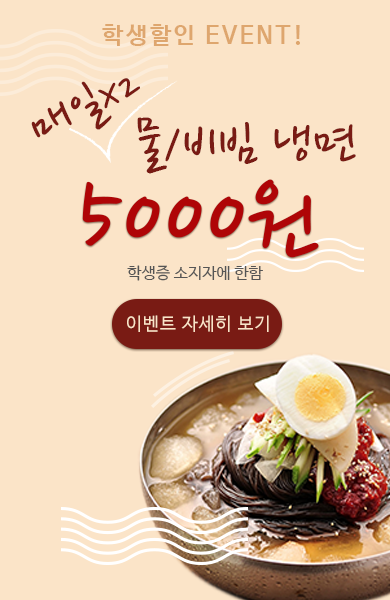
<style>
.page{position:relative;width:390px;height:600px;background:#fbe4c8}
.page>*{position:absolute;margin:0}
.t1{font:24px "NanumBarunGothicBold";letter-spacing:0.1em;color:#dea66d}
.t2{font:57.6px "NanumPen";color:#791b14}
.t3{font:49.4px "NanumPen";color:#791b14}
.t4{font:59.5px "NanumPen";color:#791b14}
.t5{font:116.1px "NanumPen";color:#af0507}
.t6{font:16px "NanumBarunGothic";color:#555555}
.t7{font:18px "NanumBarunGothic";letter-spacing:0.05em;color:#fbe4c8;text-transform:uppercase}
</style>
<div class="page">
<p class="t1" style="left:102px;top:24px;width:198px;height:22px">학생할인 EVENT!</p>
<p class="t2" style="left:31px;top:78px;width:109px;height:60px;rotate:-26deg">매일<span class="t3">X2</span></p>
<p class="t4" style="left:137px;top:117px;width:219px;height:57px">물/비빔 냉면</p>
<p class="t5" style="left:82px;top:179px;width:237px;height:79px">5000원</p>
<p class="t6" style="left:127px;top:265px;width:136px;height:16px">학생증 소지자에 한함</p>
<p class="t7" style="left:127px;top:315px;width:142px;height:17px">이벤트 자세히 보기</p>
</div>
